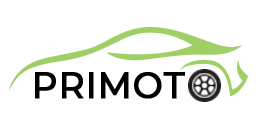
<style>
.page{position:relative;width:256px;height:130px;background:#ffffff}
.page>*{position:absolute;margin:0}
.t1{font:36px "Montserrat-Medium";color:#000000;font-weight:bold}
</style>
<div class="page">
<p class="t1" style="left:35px;top:72px;width:150px;height:27px">PRIMOT</p>
</div>
